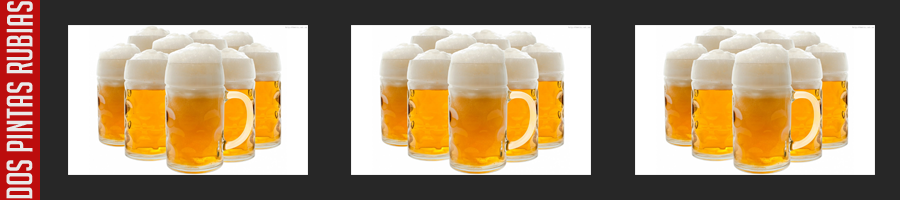
<style>
.page{position:relative;width:900px;height:200px;background:#272727}
.page>*{position:absolute;margin:0}
.t1{font:36px "BigNoodleTitling";color:#e9e9e9}
</style>
<div class="page">
<p class="t1" style="left:6px;top:1px;width:27px;height:198px;rotate:-90deg">Dos pintas rubias</p>
</div>
